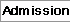
<style>
.page{position:relative;width:70px;height:22px;background:#fdfcfd}
.page>*{position:absolute;margin:0}
.t1{font:12px "ArialMT";letter-spacing:-0.11em;color:#010101;font-weight:bold;scale:1.19 1}
</style>
<div class="page">
<p class="t1" style="left:2px;top:6px;width:67px;height:9px">Admission</p>
</div>
